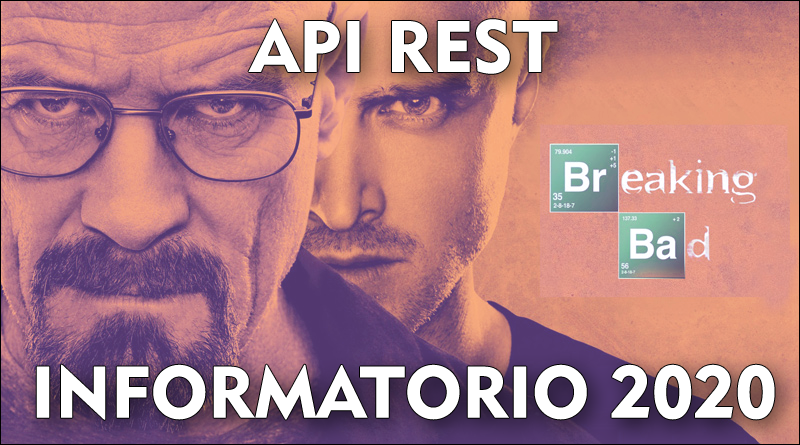
<style>
.page{position:relative;width:800px;height:445px}
.page>*{position:absolute;margin:0}
.t1{font:72px "Geometric415BT-BlackA";color:#ffffff}
</style>
<div class="page">
<p class="t1" style="left:36px;top:19px;width:739px;height:401px;text-align:center">API REST<br><br><br><br>INFORMATORIO 2020</p>
</div>
